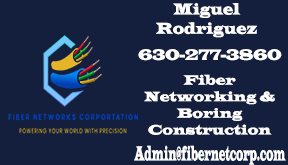
<style>
.page{position:relative;width:288px;height:165px;background:#141f3e}
.page>*{position:absolute;margin:0}
.t1{font:16.1px "LatinWide";color:#ffffff;scale:0.71 1}
.t2{font:15.3px "LatinWide";color:#ffffff;scale:0.76 1}
.t3{font:13.8px "LatinWide";color:#ffffff;scale:0.79 1}
.t4{font:20.8px "LatinWide";color:#ffffff;scale:0.34 1}
</style>
<div class="page">
<p class="t1" style="left:156px;top:3px;width:101px;height:35px;text-align:center">Miguel Rodriguez</p>
<p class="t2" style="left:138px;top:49px;width:144px;height:12px">630-277-3860</p>
<p class="t3" style="left:144px;top:74px;width:131px;height:61px;text-align:center">Fiber Networking &amp; Boring Construction</p>
<p class="t4" style="left:134px;top:145px;width:152px;height:20px">Admin@fibernetcorp.com</p>
</div>
